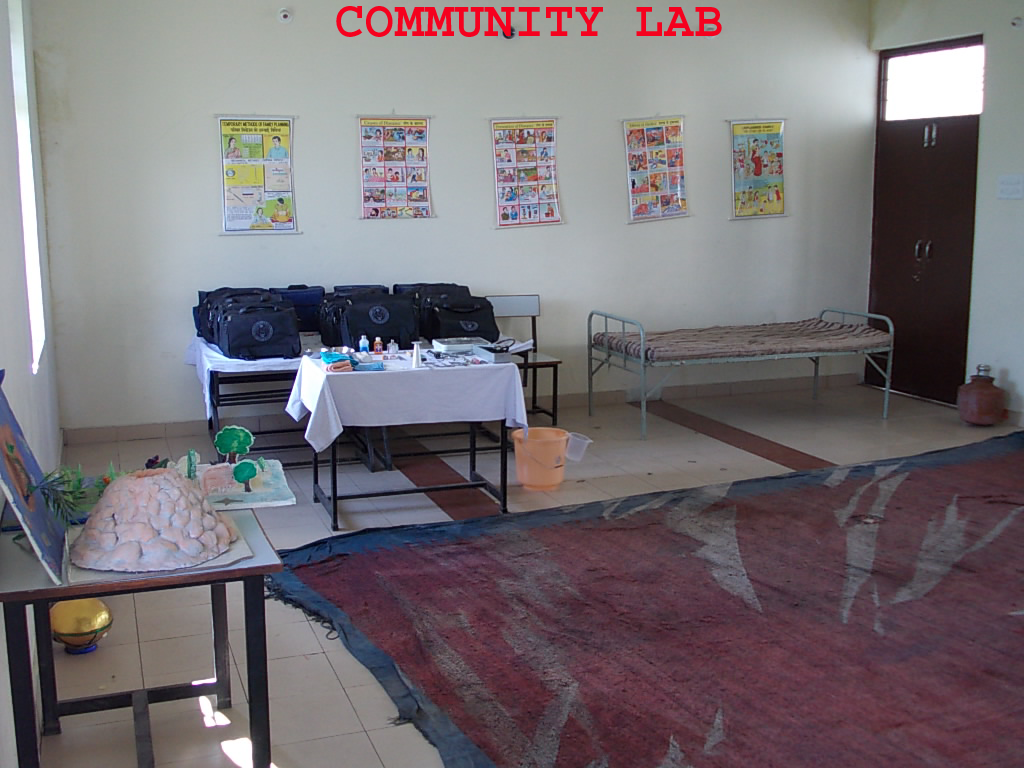
<style>
.page{position:relative;width:1024px;height:768px}
.page>*{position:absolute;margin:0}
.t1{font:50px "Courier-Bold";color:#f5011e}
</style>
<div class="page">
<p class="t1" style="left:336px;top:6px;width:386px;height:31px">COMMUNITY LAB</p>
</div>
